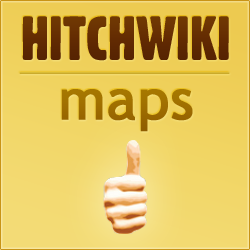
<style>
.page{position:relative;width:250px;height:250px}
.page>*{position:absolute;margin:0}
.t1{font:60.8px "Gothic821CondensedBT-Regular";color:#632b02;text-transform:uppercase}
.t2{font:56.4px "TrebuchetMS";color:#9d6b00;font-weight:bold}
</style>
<div class="page">
<p class="t1" style="left:22px;top:16px;width:207px;height:45px">Hitchwiki</p>
<p class="t2" style="left:61px;top:89px;width:132px;height:43px">maps</p>
</div>
